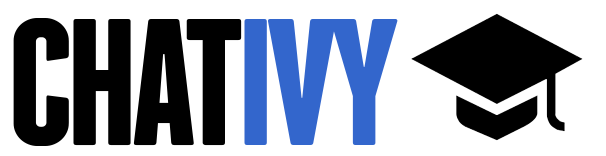
<style>
.page{position:relative;width:606px;height:156px;background:#ffffff}
.page>*{position:absolute;margin:0}
.t1{font:180.1px "Franchise-Bold";letter-spacing:-0.05em;color:#000000;scale:1.06 1}
.t2{font:180.1px "Franchise-Bold";letter-spacing:-0.05em;color:#3366cc;scale:1.06 1}
</style>
<div class="page">
<p class="t1" style="left:13px;top:18px;width:385px;height:128px">CHAT<span class="t2">IVY</span></p>
</div>
